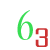
<style>
.page{position:relative;width:50px;height:50px;background:#ffffff}
.page>*{position:absolute;margin:0}
.t1{font:48.8px "NuevaStd-Cond";color:#39de54}
.t2{font:46.9px "IrisUPC";color:#cc3333}
</style>
<div class="page">
<p class="t1" style="left:17px;top:10px;width:16px;height:30px">6</p>
<p class="t2" style="left:35px;top:28px;width:13px;height:19px">3</p>
</div>
